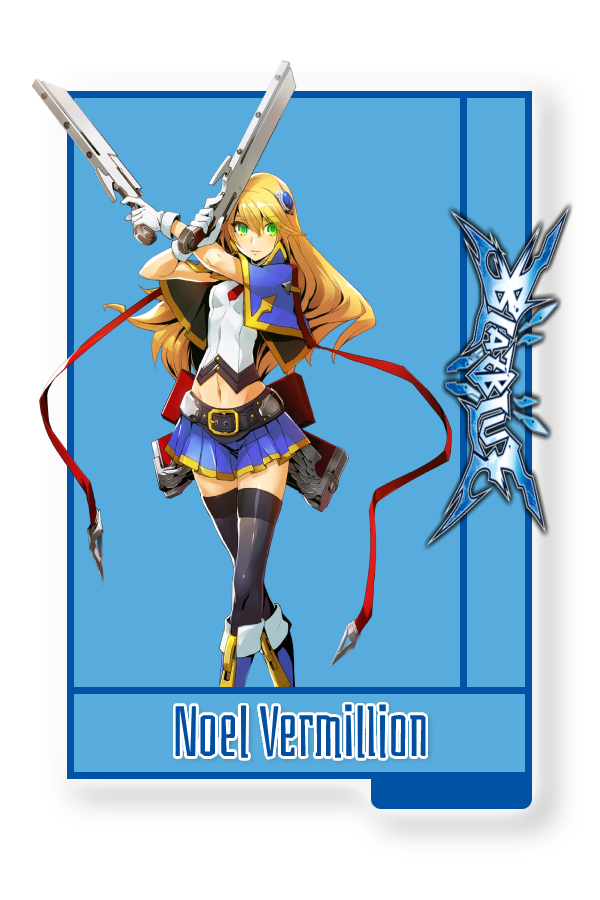
<style>
.page{position:relative;width:600px;height:900px;background:#58acdd}
.page>*{position:absolute;margin:0}
.t1{font:70px "Bahianita-Regular";color:#004fa2}
</style>
<div class="page">
<p class="t1" style="left:175px;top:704px;width:251px;height:54px">Noel Vermillion</p>
</div>
